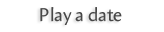
<style>
.page{position:relative;width:164px;height:32px;background:#ffffff}
.page>*{position:absolute;margin:0}
.t1{font:18.7px "Amira-Roman";color:#474747}
</style>
<div class="page">
<p class="t1" style="left:40px;top:7px;width:82px;height:18px">Play a date</p>
</div>
